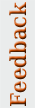
<style>
.page{position:relative;width:35px;height:108px;background:#eaecec}
.page>*{position:absolute;margin:0}
.t1{font:21.9px "DejaVuSerifCondensed-Bold"}
</style>
<div class="page">
<p class="t1" style="left:9px;top:2px;width:18px;height:104px;rotate:-90deg">Feedback</p>
</div>
